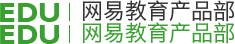
<style>
.page{position:relative;width:235px;height:44px;background:#ffffff}
.page>*{position:absolute;margin:0}
.t1{font:28px "GillSansMT-Bold";color:#39a030}
.t2{font:22px "HiraginoSansGB-W3";color:#333333}
.t3{font:22px "HiraginoSansGB-W3";color:#39a030}
</style>
<div class="page">
<p class="t1" style="left:0px;top:3px;width:59px;height:19px">EDU</p>
<p class="t2" style="left:82px;top:0px;width:152px;height:22px">网易教育产品部</p>
<p class="t1" style="left:0px;top:25px;width:59px;height:19px">EDU</p>
<p class="t3" style="left:82px;top:22px;width:152px;height:22px">网易教育产品部</p>
</div>
